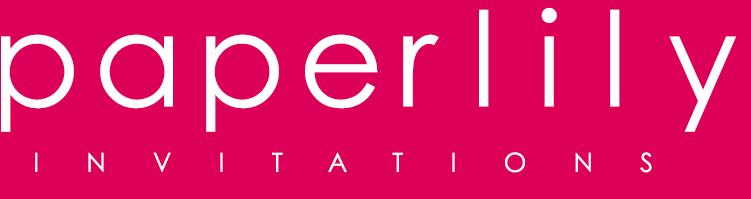
<style>
.page{position:relative;width:751px;height:199px;background:#dc0059}
.page>*{position:absolute;margin:0}
.t1{font:131px "CenturyGothic";letter-spacing:0.3em;color:#ffffff}
.t2{font:131px "CenturyGothic";letter-spacing:0.1em;color:#ffffff}
.t3{font:26.2px "CenturyGothic";letter-spacing:1.8em;color:#ffffff;text-transform:uppercase}
</style>
<div class="page">
<p class="t1" style="left:479px;top:7px;width:257px;height:125px">lily</p>
<p class="t2" style="left:1px;top:34px;width:438px;height:98px">paper</p>
<p class="t3" style="left:35px;top:152px;width:617px;height:21px">invitations</p>
</div>
